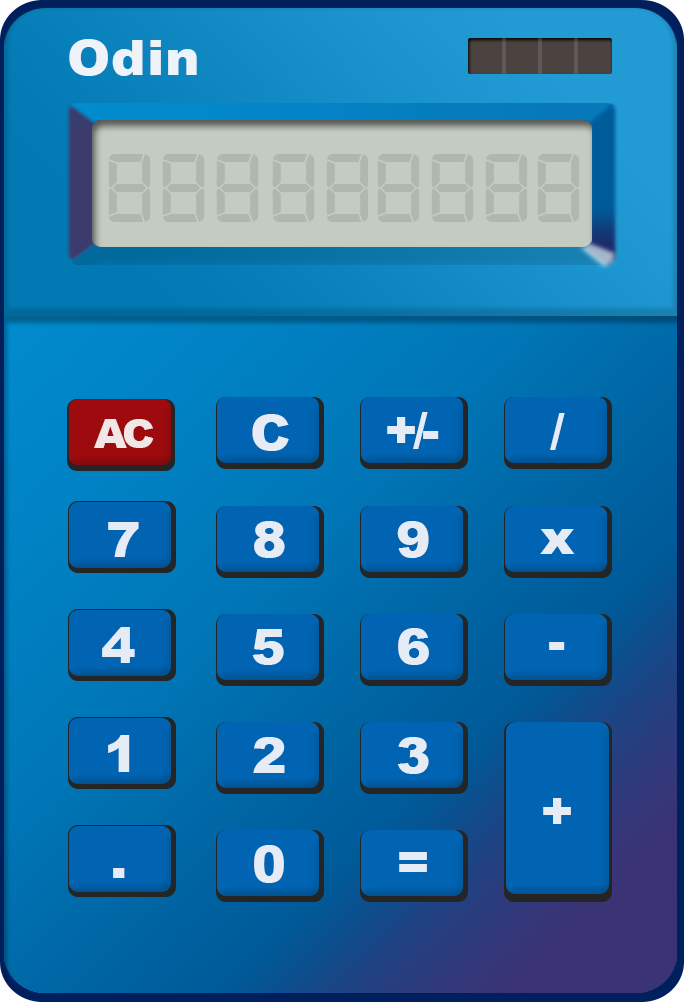
<style>
.page{position:relative;width:684px;height:1002px}
.page>*{position:absolute;margin:0}
.t1{font:49.3px "Arial-Black";letter-spacing:0.02em;color:#ffffff;scale:1.05 1}
.t2{font:104.2px "Digital-7";letter-spacing:-0.1em;color:#b1b7b0;scale:1.03 1}
.t3{font:49.4px "Arial-Black";letter-spacing:-0.1em;color:#e6ecf5;scale:1.05 1}
.t4{font:39.9px "Arial-Black";letter-spacing:-0.1em;color:#ffffff;scale:1.05 1}
.t5{font:49.8px "Arial-Black";letter-spacing:-0.1em;color:#e6ecf5}
</style>
<div class="page">
<p class="t1" style="left:69px;top:39px;width:128px;height:37px;opacity:0.89">Odin</p>
<p class="t2" style="left:108px;top:154px;width:43px;height:68px">8</p>
<p class="t2" style="left:162px;top:154px;width:43px;height:68px">8</p>
<p class="t2" style="left:216px;top:154px;width:43px;height:68px">8</p>
<p class="t2" style="left:272px;top:154px;width:43px;height:68px">8</p>
<p class="t2" style="left:326px;top:154px;width:42px;height:68px">8</p>
<p class="t2" style="left:377px;top:154px;width:43px;height:68px">8</p>
<p class="t2" style="left:431px;top:154px;width:43px;height:68px">8</p>
<p class="t2" style="left:485px;top:154px;width:43px;height:68px">8</p>
<p class="t2" style="left:537px;top:154px;width:43px;height:68px">8</p>
<p class="t3" style="left:252px;top:414px;width:37px;height:37px">C</p>
<p class="t3" style="left:387px;top:412px;width:52px;height:37px">+/-</p>
<p class="t3" style="left:550px;top:413px;width:15px;height:37px">/</p>
<p class="t4" style="left:94px;top:419px;width:60px;height:29px;opacity:0.85">AC</p>
<p class="t3" style="left:254px;top:521px;width:31px;height:37px">8</p>
<p class="t3" style="left:397px;top:521px;width:32px;height:37px">9</p>
<p class="t3" style="left:108px;top:522px;width:31px;height:35px">7</p>
<p class="t3" style="left:540px;top:529px;width:35px;height:25px">x</p>
<p class="t3" style="left:102px;top:627px;width:33px;height:36px">4</p>
<p class="t3" style="left:252px;top:629px;width:32px;height:36px">5</p>
<p class="t3" style="left:398px;top:628px;width:31px;height:37px">6</p>
<p class="t3" style="left:549px;top:642px;width:16px;height:8px">-</p>
<p class="t5" style="left:108px;top:735px;width:22px;height:37px">1</p>
<p class="t3" style="left:253px;top:737px;width:32px;height:36px">2</p>
<p class="t3" style="left:398px;top:737px;width:31px;height:37px">3</p>
<p class="t3" style="left:543px;top:798px;width:28px;height:26px">+</p>
<p class="t5" style="left:254px;top:845px;width:30px;height:38px">0</p>
<p class="t3" style="left:399px;top:852px;width:28px;height:20px">=</p>
<p class="t3" style="left:113px;top:868px;width:12px;height:10px">.</p>
</div>
